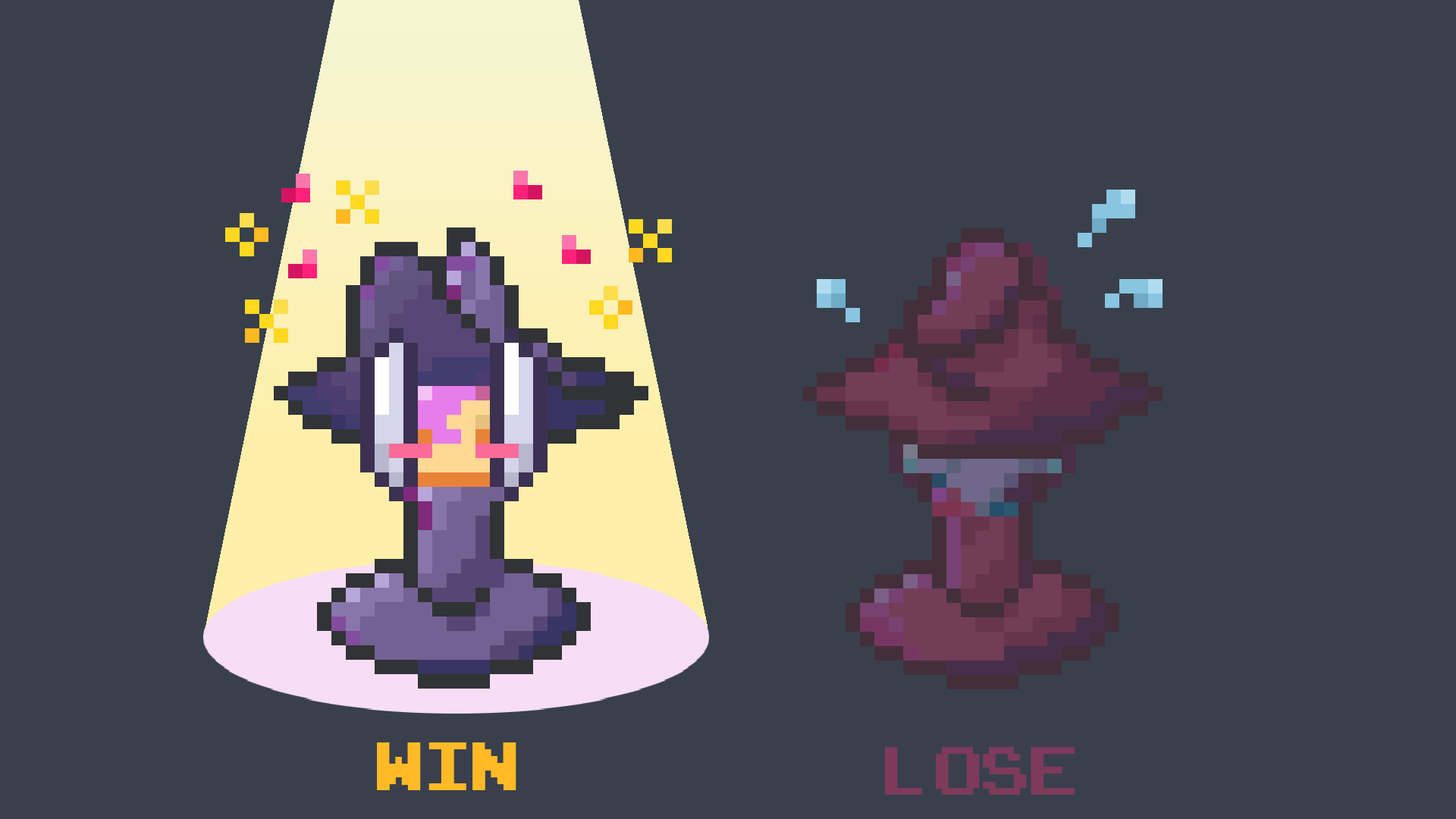
<style>
.page{position:relative;width:1456px;height:819px;background:#39404c}
.page>*{position:absolute;margin:0}
.t1{font:96.5px "ArcadeClassic";color:#ffba26;scale:0.9 1}
.t2{font:96.5px "ArcadeClassic";color:#7e3a5a;scale:0.9 1}
</style>
<div class="page">
<p class="t1" style="left:377px;top:742px;width:139px;height:48px">WIN</p>
<p class="t2" style="left:885px;top:747px;width:190px;height:48px">lose</p>
</div>
